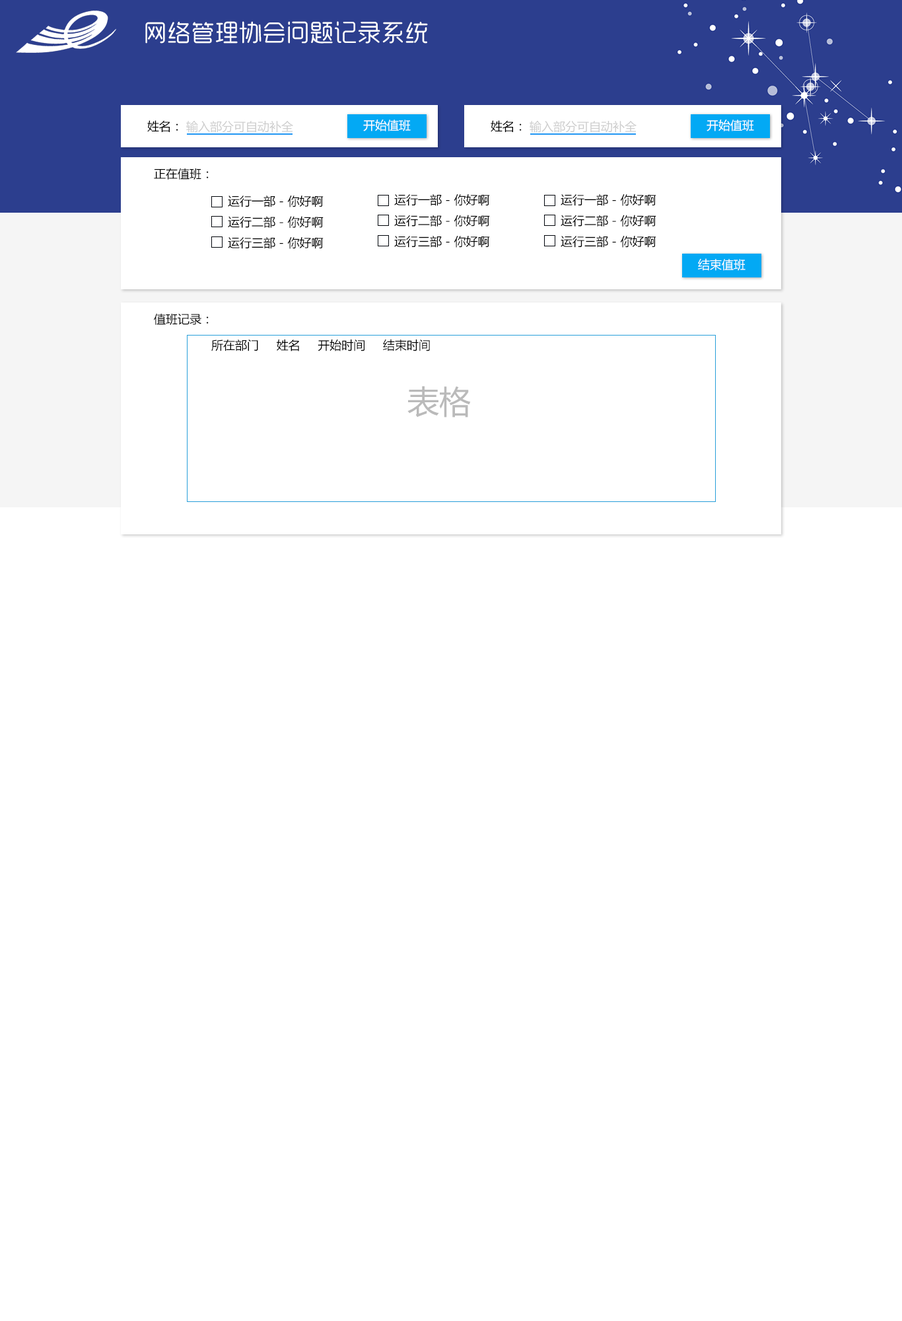
<style>
.page{position:relative;width:902px;height:1321px;background:#ffffff}
.page>*{position:absolute;margin:0}
.t1{font:23.8px "MFYueYuan_Noncommercial-Regular";color:#ffffff}
.t2{font:11.9px "MicrosoftYaHeiUI";color:#000000}
.t3{font:11.9px "MicrosoftYaHeiUI";color:#cdcdcd}
.t4{font:11.9px "MicrosoftYaHeiUI";color:#ffffff}
.t5{font:31.7px "MicrosoftYaHeiUI";color:#bababa}
</style>
<div class="page">
<p class="t1" style="left:145px;top:21px;width:283px;height:23px">网络管理协会问题记录系统</p>
<p class="t2" style="left:147px;top:120px;width:31px;height:12px">姓名：</p>
<p class="t3" style="left:186px;top:121px;width:107px;height:12px">输入部分可自动补全</p>
<p class="t4" style="left:363px;top:120px;width:48px;height:11px">开始值班</p>
<p class="t2" style="left:491px;top:120px;width:31px;height:12px">姓名：</p>
<p class="t3" style="left:530px;top:121px;width:107px;height:12px">输入部分可自动补全</p>
<p class="t4" style="left:707px;top:120px;width:47px;height:11px">开始值班</p>
<p class="t2" style="left:154px;top:168px;width:55px;height:12px">正在值班：</p>
<p class="t2" style="left:228px;top:196px;width:96px;height:53px">运行一部 - 你好啊<br>运行二部 - 你好啊<br>运行三部 - 你好啊</p>
<p class="t2" style="left:394px;top:194px;width:96px;height:54px">运行一部 - 你好啊<br>运行二部 - 你好啊<br>运行三部 - 你好啊</p>
<p class="t2" style="left:561px;top:194px;width:96px;height:54px">运行一部 - 你好啊<br>运行二部 - 你好啊<br>运行三部 - 你好啊</p>
<p class="t4" style="left:698px;top:258px;width:48px;height:13px">结束值班</p>
<p class="t2" style="left:154px;top:313px;width:55px;height:12px">值班记录：</p>
<p class="t2" style="left:211px;top:339px;width:219px;height:12px">所在部门     姓名     开始时间     结束时间</p>
<p class="t5" style="left:408px;top:386px;width:63px;height:32px">表格</p>
</div>
